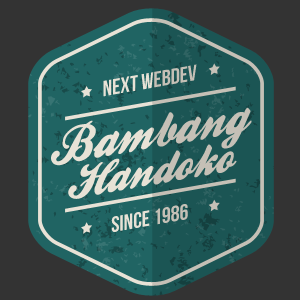
<style>
.page{position:relative;width:300px;height:300px;background:#333333}
.page>*{position:absolute;margin:0}
.t1{font:22.1px "BebasNeue"}
.t2{font:50.3px "BallparkWeiner"}
.t3{font:46.6px "BallparkWeiner"}
</style>
<div class="page">
<p class="t1" style="left:103px;top:64px;width:94px;height:33px;rotate:-10deg">NEXT WEBDEV</p>
<p class="t2" style="left:51px;top:107px;width:201px;height:59px;rotate:-10deg">Bambang</p>
<p class="t3" style="left:68px;top:144px;width:169px;height:55px;rotate:-10deg">Handoko</p>
<p class="t1" style="left:111px;top:204px;width:77px;height:28px;rotate:-10deg">Since 1986</p>
</div>
